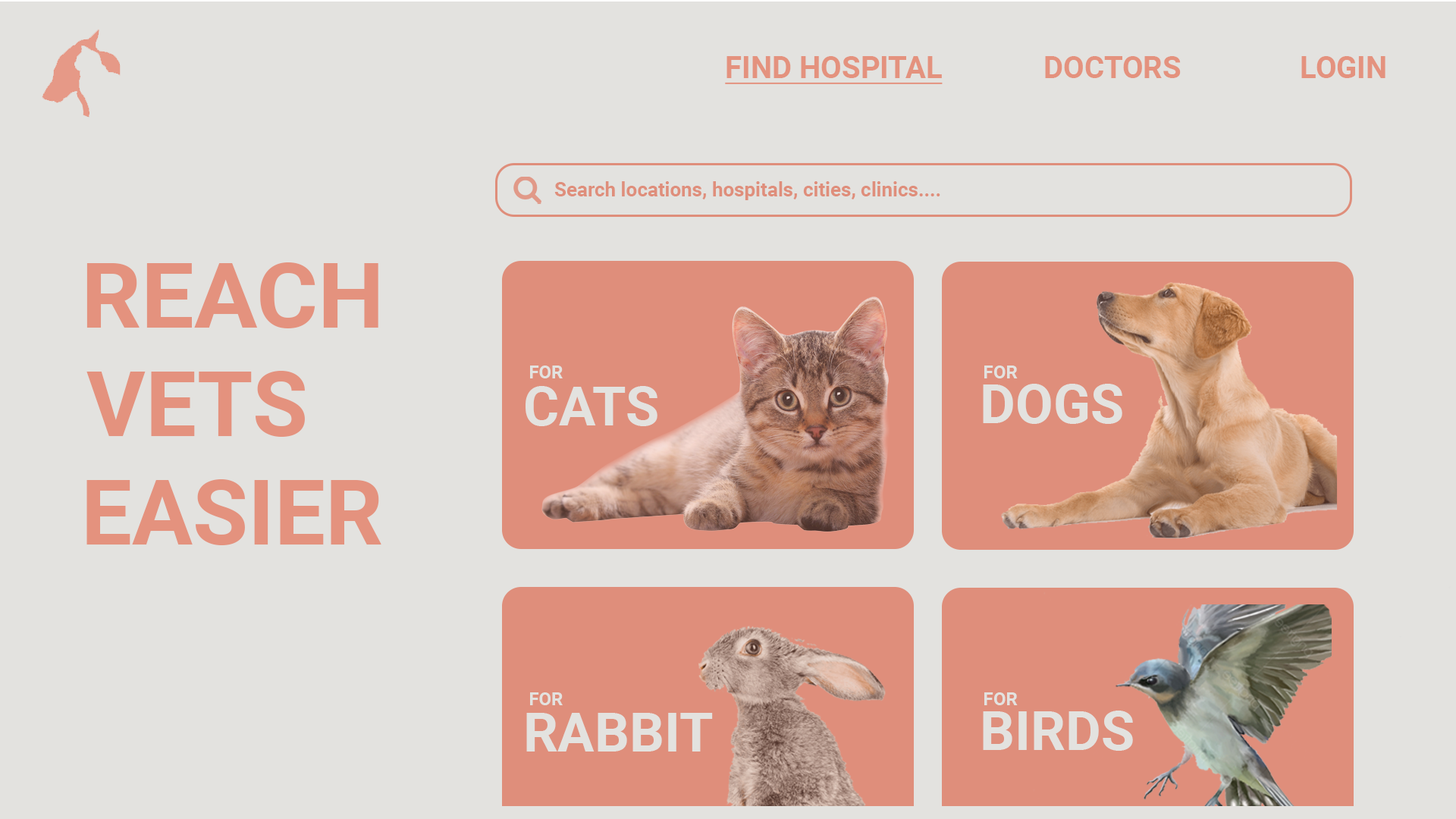
<style>
.page{position:relative;width:1456px;height:819px;background:#e3e2df}
.page>*{position:absolute;margin:0}
.t1{font:30.3px "Roboto-Bold";color:#e4927e;text-decoration:underline}
.t2{font:30.3px "Roboto-Bold";color:#e4927e}
.t3{font:19.7px "Roboto-Bold";color:#df8e7b}
.t4{font:90.2px "Roboto-Bold";color:#e4927e}
.t5{font:90.2px "Roboto-Bold";color:#e4927e;scale:1.04 1}
.t6{font:18.2px "Roboto-Bold";color:#e3e2df}
.t7{font:54.6px "Roboto-Bold";color:#e3e2df}
</style>
<div class="page">
<p class="t1" style="left:725px;top:56px;width:218px;height:28px">FIND HOSPITAL</p>
<p class="t2" style="left:1045px;top:56px;width:136px;height:22px">DOCTORS</p>
<p class="t2" style="left:1301px;top:56px;width:84px;height:22px">LOGIN</p>
<p class="t3" style="left:554px;top:181px;width:386px;height:19px">Search locations, hospitals, cities, clinics....</p>
<p class="t4" style="left:86px;top:262px;width:295px;height:283px"><span class="t5">REACH <br></span>VETS <br>EASIER</p>
<p class="t6" style="left:530px;top:366px;width:33px;height:12px">FOR</p>
<p class="t6" style="left:984px;top:366px;width:34px;height:12px">FOR</p>
<p class="t7" style="left:526px;top:386px;width:131px;height:40px">CATS</p>
<p class="t7" style="left:983px;top:384px;width:139px;height:40px">DOGS</p>
<p class="t6" style="left:530px;top:692px;width:33px;height:13px">FOR</p>
<p class="t6" style="left:984px;top:692px;width:34px;height:13px">FOR</p>
<p class="t7" style="left:526px;top:713px;width:187px;height:38px">RABBIT</p>
<p class="t7" style="left:983px;top:711px;width:150px;height:40px">BIRDS</p>
</div>
